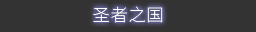
<style>
.page{position:relative;width:256px;height:32px;background:#333333}
.page>*{position:absolute;margin:0}
.t1{font:17px "NotoSansSC-Thin";letter-spacing:0.06em;color:#ffffff}
</style>
<div class="page">
<p class="t1" style="left:93px;top:6px;width:70px;height:17px">圣者之国</p>
</div>
